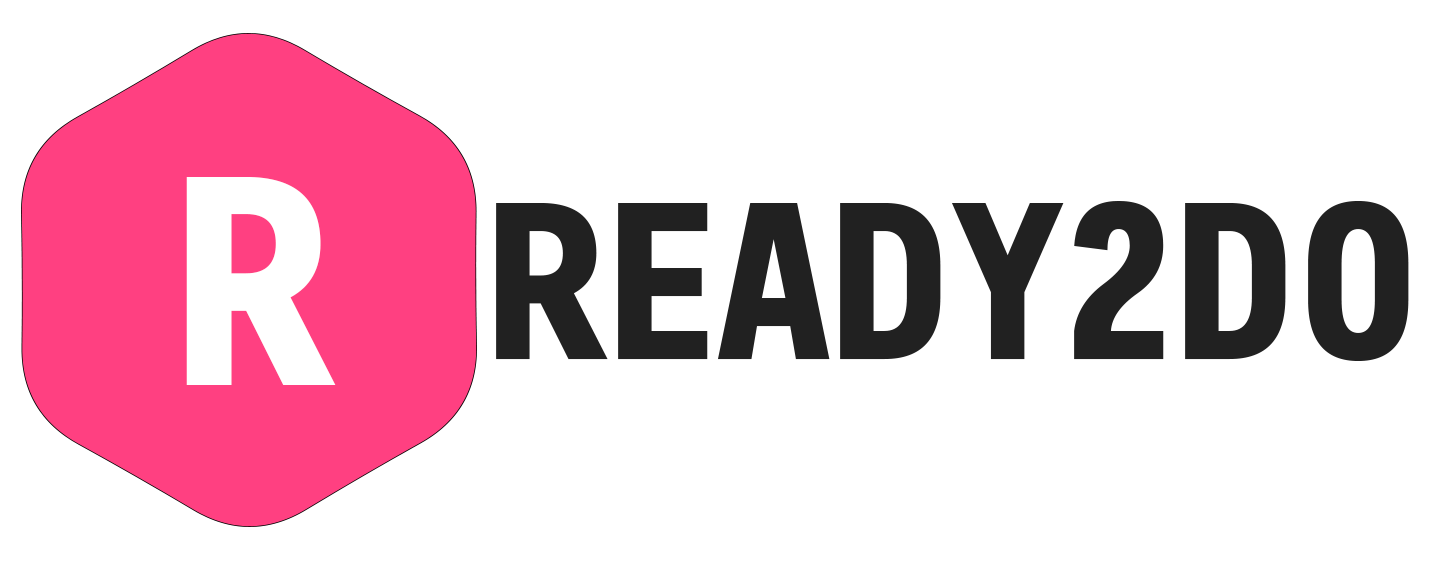
<style>
.page{position:relative;width:1440px;height:561px;background:#ffffff}
.page>*{position:absolute;margin:0}
.t1{font:304.1px "FreeroadBold";color:#ffffff}
.t2{font:228px "FreeroadBold";color:#212121}
</style>
<div class="page">
<p class="t1" style="left:186px;top:177px;width:150px;height:208px">R</p>
<p class="t2" style="left:496px;top:201px;width:913px;height:160px">READY2DO</p>
</div>
